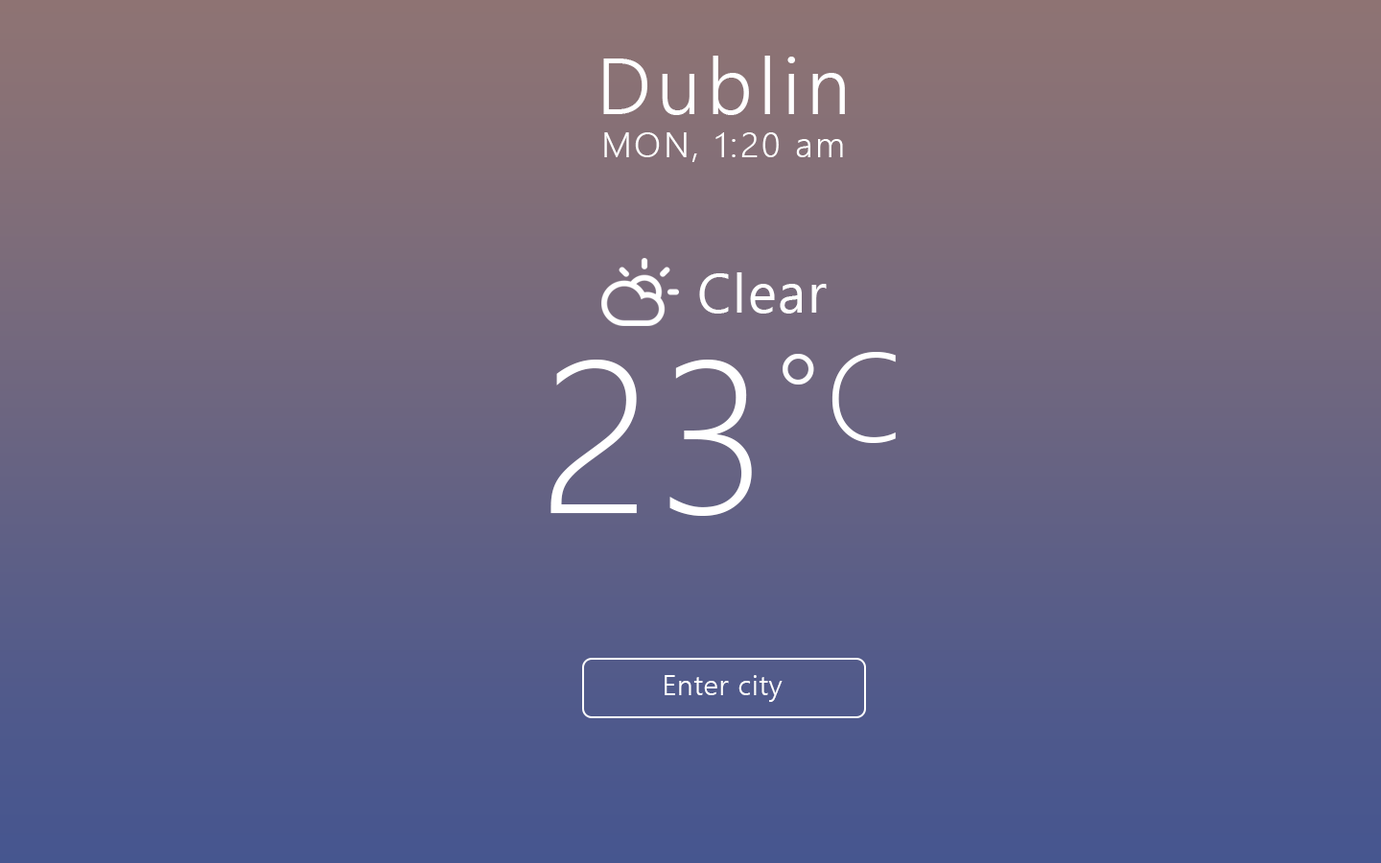
<style>
.page{position:relative;width:1381px;height:863px}
.page>*{position:absolute;margin:0}
.t1{font:79.7px "SegoeUI-Semilight";letter-spacing:0.075em;color:#ffffff}
.t2{font:35.1px "SegoeUI-Semilight";letter-spacing:0.075em;color:#ffffff}
.t3{font:94.4px "SegoeUI";letter-spacing:0.025em;color:#ffffff}
.t4{font:215.8px "SegoeUI-Light";letter-spacing:0.025em;color:#ffffff}
.t5{font:28.8px "SegoeUI-Semilight";letter-spacing:0.025em;color:#ffffff}
</style>
<div class="page">
<p class="t1" style="left:603px;top:56px;width:242px;height:59px">Dublin</p>
<p class="t2" style="left:604px;top:132px;width:239px;height:30px">MON, 1:20 am</p>
<p class="t3" style="left:699px;top:272px;width:128px;height:42px">Clear</p>
<p class="t4" style="left:551px;top:352px;width:345px;height:164px">23°C</p>
<p class="t5" style="left:665px;top:675px;width:118px;height:27px">Enter city</p>
</div>
